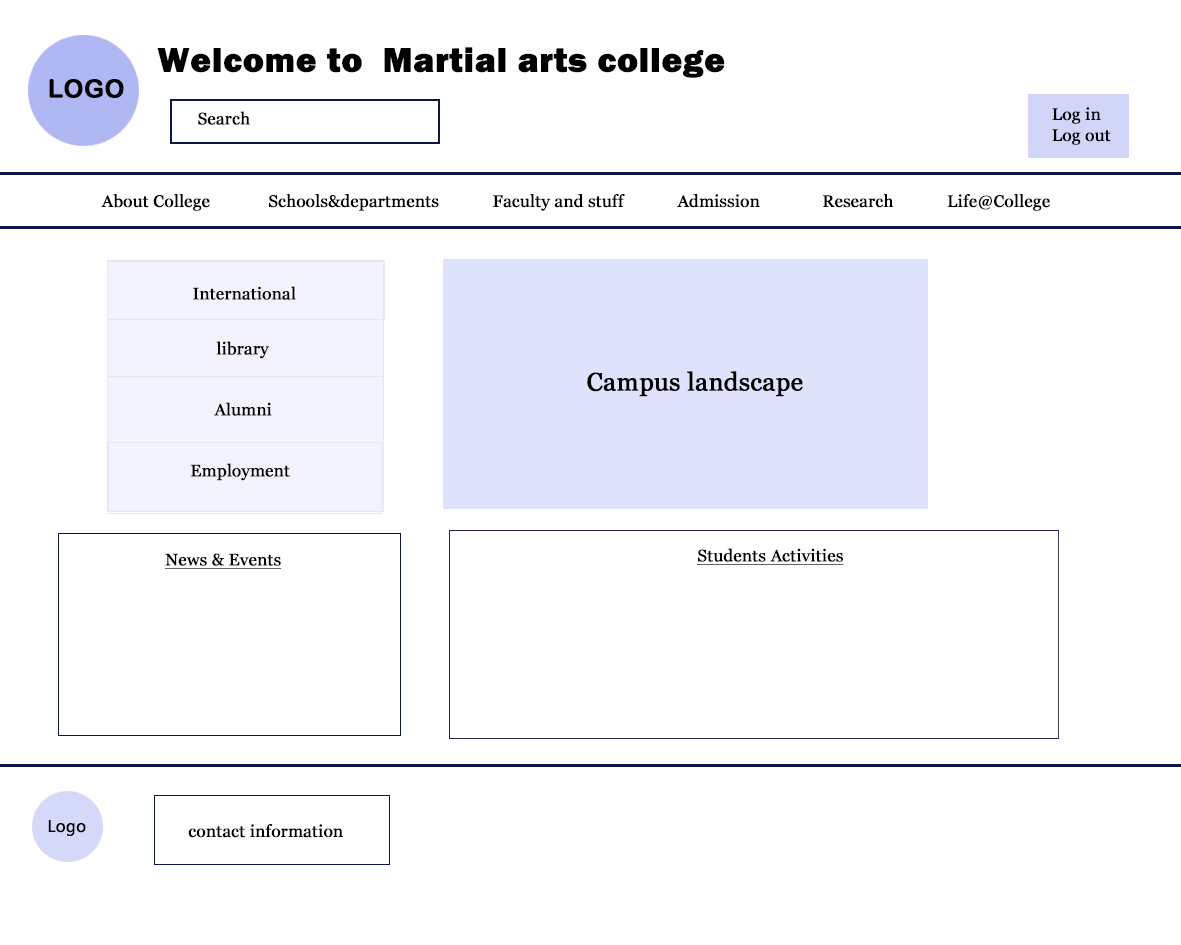
<style>
.page{position:relative;width:1181px;height:945px;background:#ffffff}
.page>*{position:absolute;margin:0}
.t1{font:25px "ArialRoundedMTBold";color:#000000;font-weight:bold}
.t2{font:16.7px "Georgia";color:#000000;font-weight:bold}
.t3{font:25px "Georgia";color:#000000;font-weight:bold}
.t4{font:16.7px "Georgia";color:#000000;font-weight:bold;text-decoration:underline}
.t5{font:16.7px "SegoeUISymbol";color:#000000;font-weight:bold}
</style>
<div class="page">
<p class="t1" style="left:49px;top:79px;width:75px;height:19px">LOGO</p>
<p class="t2" style="left:198px;top:111px;width:52px;height:14px">Search</p>
<p class="t2" style="left:1052px;top:129px;width:59px;height:16px">Log out</p>
<p class="t2" style="left:101px;top:194px;width:949px;height:17px">About College             Schools&amp;departments            Faculty and stuff            Admission              Research            Life@College</p>
<p class="t2" style="left:193px;top:286px;width:103px;height:14px">International</p>
<p class="t2" style="left:216px;top:341px;width:53px;height:18px">library</p>
<p class="t3" style="left:587px;top:371px;width:216px;height:26px">Campus landscape</p>
<p class="t2" style="left:214px;top:402px;width:58px;height:14px">Alumni</p>
<p class="t2" style="left:190px;top:463px;width:100px;height:18px">Employment</p>
<p class="t4" style="left:165px;top:553px;width:117px;height:16px">News &amp; Events</p>
<p class="t4" style="left:697px;top:548px;width:147px;height:17px">Students Activities</p>
<p class="t5" style="left:48px;top:820px;width:38px;height:16px">Logo</p>
<p class="t2" style="left:188px;top:824px;width:155px;height:14px">contact information</p>
</div>
